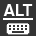
<style>
.page{position:relative;width:36px;height:36px;background:#333333}
.page>*{position:absolute;margin:0}
.t1{font:16px "Swiss721BT-Bold";color:#ffffff}
</style>
<div class="page">
<p class="t1" style="left:3px;top:4px;width:30px;height:12px">ALT</p>
</div>
